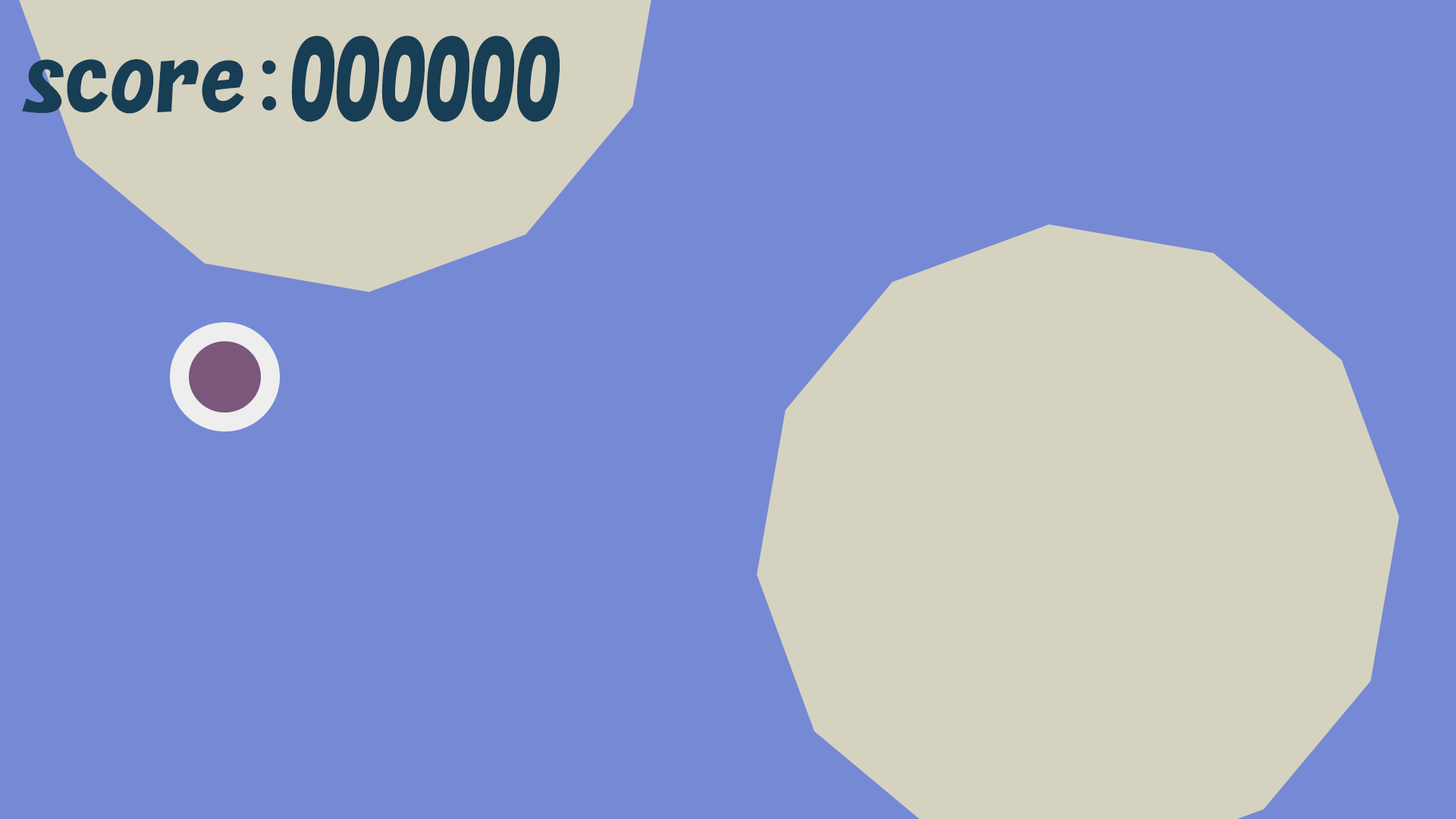
<style>
.page{position:relative;width:1456px;height:819px;background:#7689d5}
.page>*{position:absolute;margin:0}
.t1{font:94.8px "HGSoeiKakupoptai";letter-spacing:-0.025em;color:#173e54}
</style>
<div class="page">
<p class="t1" style="left:22px;top:36px;width:538px;height:86px">score:000000</p>
</div>
